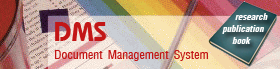
<style>
.page{position:relative;width:280px;height:69px}
.page>*{position:absolute;margin:0}
.t1{font:14px "DSWattanaasItalic";color:#fefdfd}
.t2{font:36px "JSChaimongkolas";color:#c41616}
.t3{font:18px "JSSynjaias";color:#c41616}
</style>
<div class="page">
<p class="t1" style="left:235px;top:13px;width:33px;height:7px">research</p>
<p class="t2" style="left:55px;top:22px;width:51px;height:19px">DMS</p>
<p class="t1" style="left:222px;top:25px;width:42px;height:9px">publication</p>
<p class="t1" style="left:232px;top:37px;width:19px;height:7px">book</p>
<p class="t3" style="left:55px;top:50px;width:153px;height:11px">Document Management System</p>
</div>
